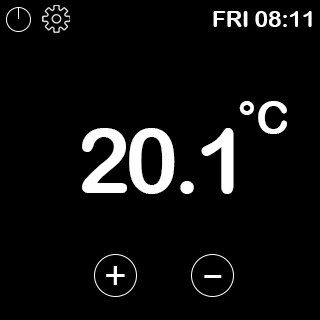
<style>
.page{position:relative;width:320px;height:320px;background:#000000}
.page>*{position:absolute;margin:0}
.t1{font:22.6px "ArialRoundedMTBold";color:#ffffff}
.t2{font:45.2px "ArialRoundedMTBold";color:#ffffff}
.t3{font:90.3px "ArialRoundedMTBold";letter-spacing:-0.06em;color:#ffffff}
.t4{font:45.2px "Alef-Regular";color:#ffffff}
</style>
<div class="page">
<p class="t1" style="left:213px;top:11px;width:99px;height:16px">FRI 08:11</p>
<p class="t2" style="left:239px;top:101px;width:48px;height:33px">°C</p>
<p class="t3" style="left:82px;top:128px;width:152px;height:66px">20.1</p>
<p class="t4" style="left:106px;top:266px;width:19px;height:19px">+</p>
<p class="t4" style="left:204px;top:275px;width:18px;height:3px">-</p>
</div>
